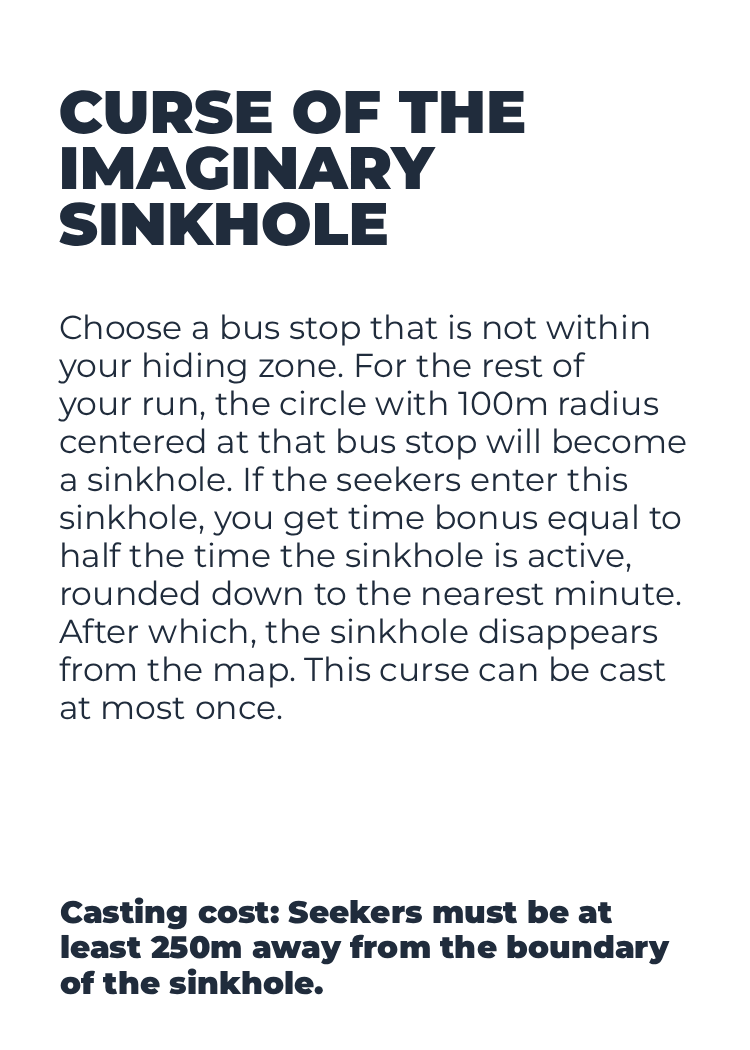
<style>
.page{position:relative;width:750px;height:1050px;background:#ffffff}
.page>*{position:absolute;margin:0}
.t1{font:59.8px/56.4px "Montserrat-Black";color:#202c3c}
.t2{font:33.1px/38px "Montserrat-Regular";color:#202c3c}
.t3{font:31.1px/35.6px "Montserrat-Black";color:#202c3c}
</style>
<div class="page">
<p class="t1" style="left:59px;top:90px;width:466px;height:156px">CURSE OF THE<br>IMAGINARY<br>SINKHOLE</p>
<p class="t2" style="left:58px;top:314px;width:628px;height:406px">Choose a bus stop that is not within<br>your hiding zone. For the rest of<br>your run, the circle with 100m radius<br>centered at that bus stop will become<br>a sinkhole. If the seekers enter this<br>sinkhole, you get time bonus equal to<br>half the time the sinkhole is active,<br>rounded down to the nearest minute.<br>After which, the sinkhole disappears<br>from the map. This curse can be cast<br>at most once.</p>
<p class="t3" style="left:60px;top:897px;width:610px;height:98px">Casting cost: Seekers must be at<br>least 250m away from the boundary<br>of the sinkhole.</p>
</div>
